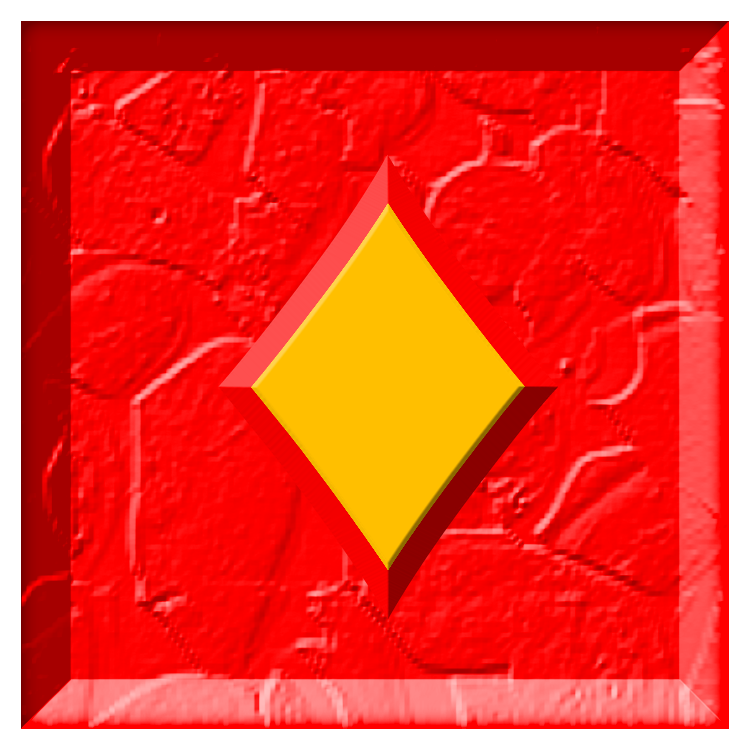
<style>
.page{position:relative;width:750px;height:750px}
.page>*{position:absolute;margin:0}
.t1{font:756.9px "ArialMT"}
</style>
<div class="page">
<p class="t1" style="left:218px;top:154px;width:340px;height:465px">♦</p>
</div>
